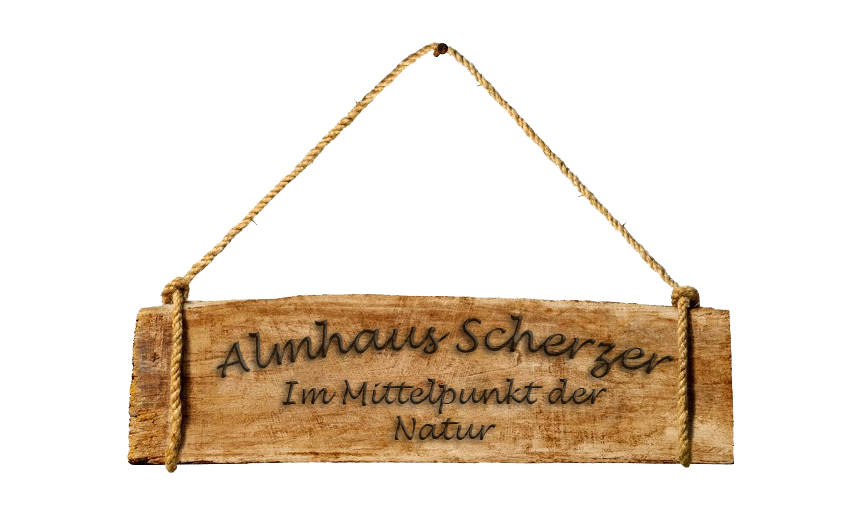
<style>
.page{position:relative;width:860px;height:514px;background:#ffffff}
.page>*{position:absolute;margin:0}
.t1{font:43.4px "LucidaHandwriting-Italic"}
.t2{font:30px "LucidaHandwriting-Italic"}
</style>
<div class="page">
<p class="t1" style="left:216px;top:314px;width:459px;height:64px">Almhaus Scherzer</p>
<p class="t2" style="left:282px;top:378px;width:325px;height:62px;text-align:center">Im Mittelpunkt der<br>Natur</p>
</div>
